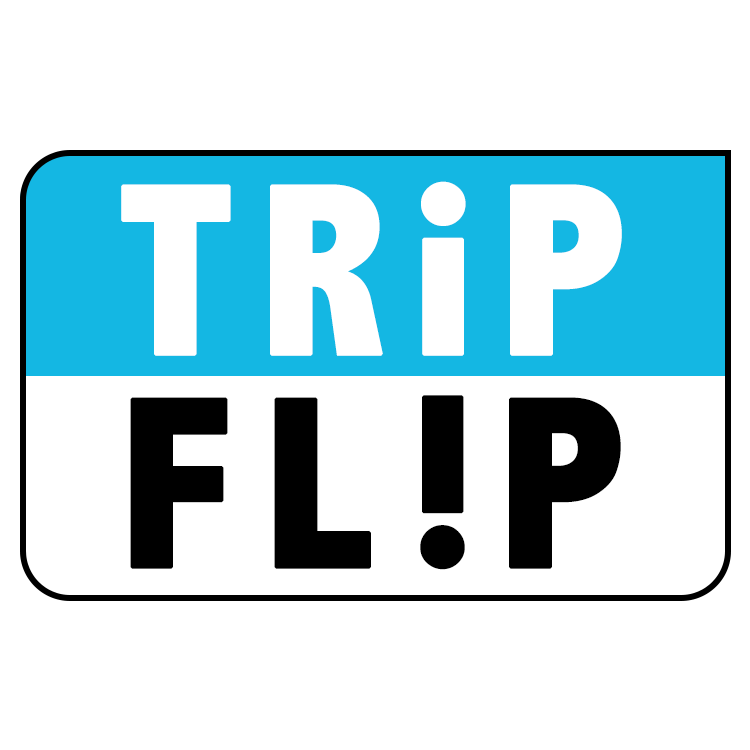
<style>
.page{position:relative;width:750px;height:750px;background:#ffffff}
.page>*{position:absolute;margin:0}
.t1{font:246.3px "AbadiMT-CondensedExtraBold";letter-spacing:0.08em;color:#ffffff;font-weight:bold}
.t2{font:246.3px "AbadiMT-CondensedExtraBold";letter-spacing:0.08em;color:#000000;font-weight:bold}
</style>
<div class="page">
<p class="t1" style="left:121px;top:181px;width:501px;height:175px">TRiP</p>
<p class="t2" style="left:130px;top:397px;width:98px;height:172px">F</p>
<p class="t2" style="left:274px;top:397px;width:97px;height:172px">L</p>
<p class="t2" style="left:420px;top:395px;width:45px;height:175px;rotate:-180deg">i</p>
<p class="t2" style="left:509px;top:397px;width:112px;height:172px">P</p>
</div>
